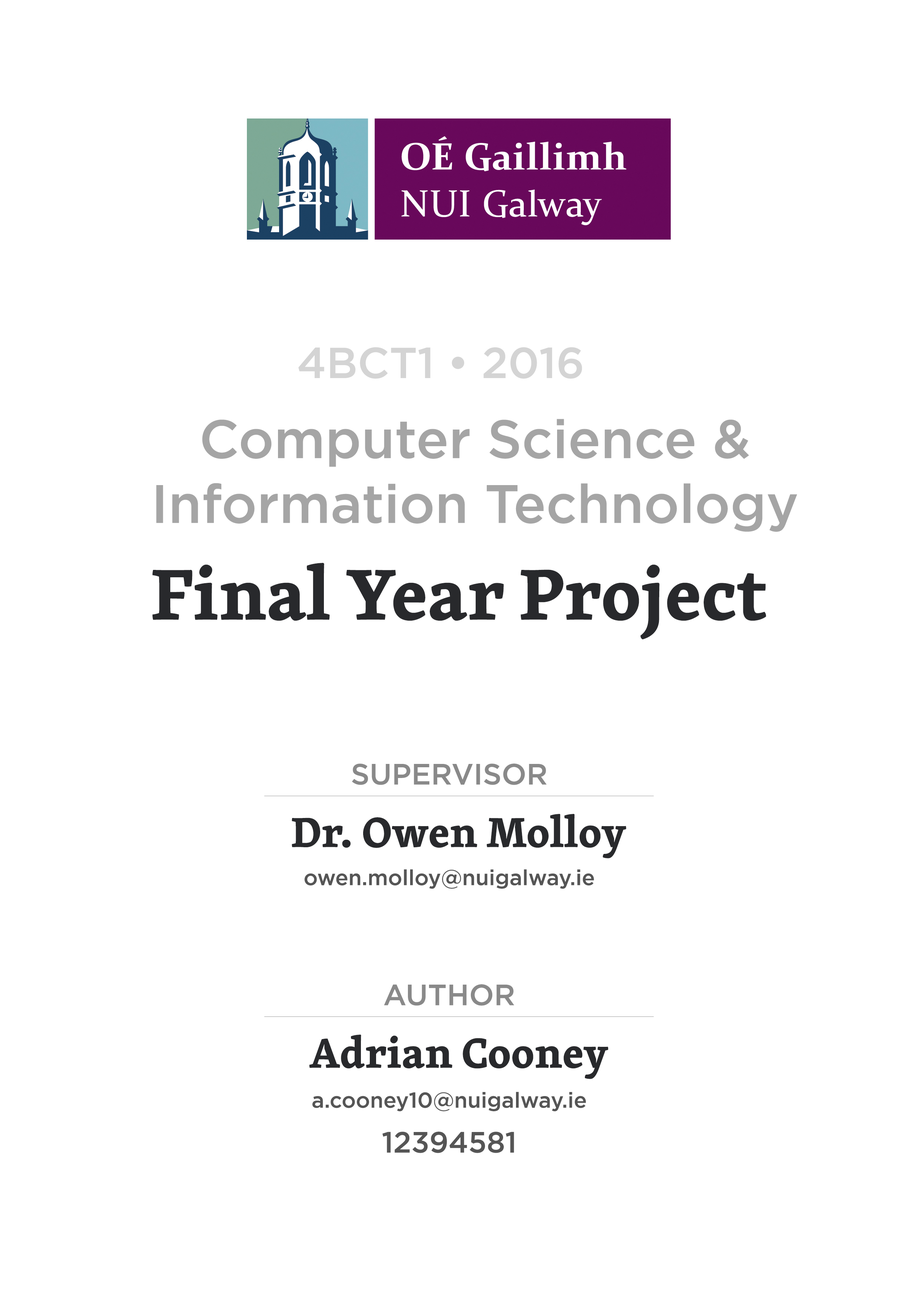
<style>
.page{position:relative;width:918px;height:1299px;background:#ffffff}
.page>*{position:absolute;margin:0}
.t1{font:43.2px "Gotham-Medium";color:#d4d4d4}
.t2{font:54px "Gotham-Medium";color:#a5a5a5}
.t3{font:74px "Skolar-Bold";color:#28292c}
.t4{font:29.3px "Gotham-Medium";color:#898989}
.t5{font:43.2px "Skolar-Bold";color:#28292c}
.t6{font:21.6px "Gotham-Medium";color:#555555}
.t7{font:29.3px "Gotham-Medium";color:#555555}
</style>
<div class="page">
<p class="t1" style="left:298px;top:347px;width:284px;height:32px">4BCT1 • 2016</p>
<p class="t2" style="left:156px;top:419px;width:641px;height:113px;text-align:center">Computer Science &amp; <br>Information Technology</p>
<p class="t3" style="left:152px;top:563px;width:614px;height:76px">Final Year Project</p>
<p class="t4" style="left:352px;top:763px;width:195px;height:22px">SUPERVISOR</p>
<p class="t5" style="left:292px;top:814px;width:334px;height:44px">Dr. Owen Molloy</p>
<p class="t6" style="left:304px;top:869px;width:290px;height:20px">owen.molloy@nuigalway.ie</p>
<p class="t4" style="left:384px;top:984px;width:130px;height:22px">AUTHOR</p>
<p class="t5" style="left:309px;top:1034px;width:299px;height:45px">Adrian Cooney</p>
<p class="t6" style="left:312px;top:1091px;width:274px;height:20px">a.cooney10@nuigalway.ie</p>
<p class="t7" style="left:382px;top:1131px;width:132px;height:22px">12394581</p>
</div>
